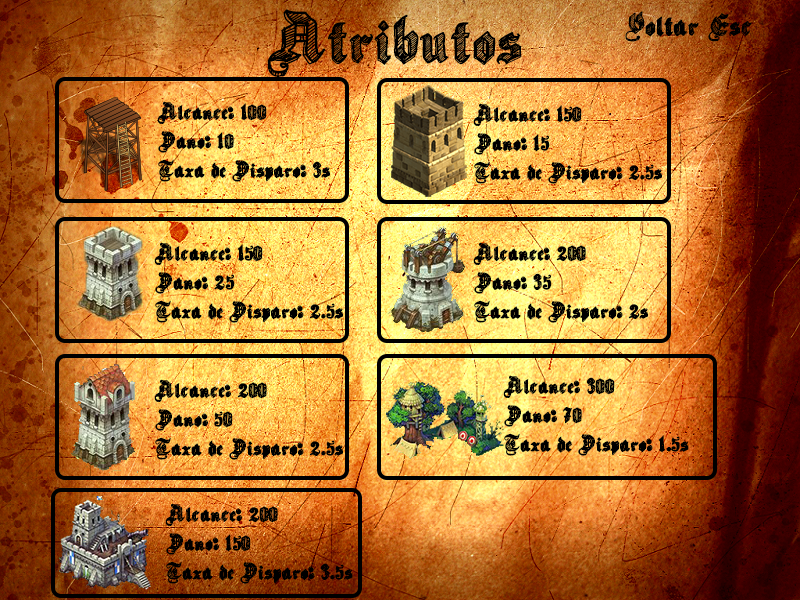
<style>
.page{position:relative;width:800px;height:600px}
.page>*{position:absolute;margin:0}
.t1{font:73.3px "SketchGothicSchool";color:#000000}
.t2{font:32px "SketchGothicSchool";color:#000000}
.t3{font:24px "SketchGothicSchool";color:#000000}
</style>
<div class="page">
<p class="t1" style="left:267px;top:9px;width:255px;height:68px">Atributos</p>
<p class="t2" style="left:625px;top:11px;width:127px;height:31px">Voltar Esc</p>
<p class="t3" style="left:157px;top:101px;width:173px;height:81px">Alcance: 100<br>Dano: 10<br>Taxa de Disparo: 3s</p>
<p class="t3" style="left:473px;top:103px;width:189px;height:81px">Alcance: 150<br>Dano: 15<br>Taxa de Disparo: 2.5s</p>
<p class="t3" style="left:154px;top:242px;width:189px;height:81px">Alcance: 150<br>Dano: 25<br>Taxa de Disparo: 2.5s</p>
<p class="t3" style="left:473px;top:242px;width:175px;height:81px">Alcance: 200<br>Dano: 35<br>Taxa de Disparo: 2s</p>
<p class="t3" style="left:503px;top:375px;width:186px;height:81px">Alcance: 300<br>Dano: 70<br>Taxa de Disparo: 1.5s</p>
<p class="t3" style="left:154px;top:379px;width:189px;height:81px">Alcance: 200<br>Dano: 50<br>Taxa de Disparo: 2.5s</p>
<p class="t3" style="left:165px;top:503px;width:188px;height:81px">Alcance: 200<br>Dano: 150<br>Taxa de Disparo: 3.5s</p>
</div>
